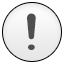
<style>
.page{position:relative;width:64px;height:64px;background:#ffffff}
.page>*{position:absolute;margin:0}
.t1{font:55px "CourierNewPS-BoldMT";color:#504e4e}
</style>
<div class="page">
<p class="t1" style="left:27px;top:13px;width:9px;height:37px">!</p>
</div>
